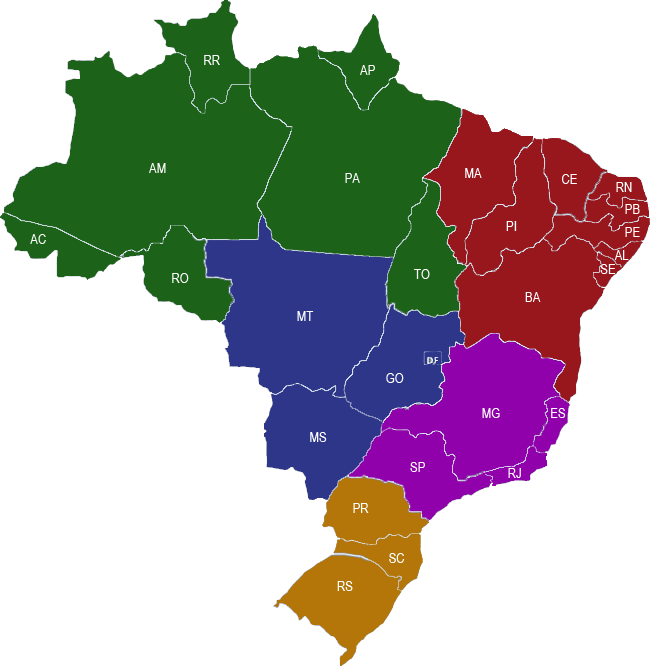
<style>
.page{position:relative;width:650px;height:666px;background:#ffffff}
.page>*{position:absolute;margin:0}
.t1{font:14px "ArialNarrow";color:#ffffff}
</style>
<div class="page">
<p class="t1" style="left:204px;top:55px;width:16px;height:10px">RR</p>
<p class="t1" style="left:360px;top:65px;width:15px;height:10px">AP</p>
<p class="t1" style="left:149px;top:163px;width:17px;height:10px">AM</p>
<p class="t1" style="left:345px;top:173px;width:15px;height:10px">PA</p>
<p class="t1" style="left:465px;top:168px;width:17px;height:10px">MA</p>
<p class="t1" style="left:562px;top:174px;width:15px;height:10px">CE</p>
<p class="t1" style="left:616px;top:182px;width:16px;height:10px">RN</p>
<p class="t1" style="left:625px;top:204px;width:15px;height:10px">PB</p>
<p class="t1" style="left:506px;top:221px;width:11px;height:10px">PI</p>
<p class="t1" style="left:625px;top:227px;width:15px;height:10px">PE</p>
<p class="t1" style="left:30px;top:234px;width:16px;height:10px">AC</p>
<p class="t1" style="left:614px;top:250px;width:15px;height:10px">AL</p>
<p class="t1" style="left:414px;top:269px;width:16px;height:10px">TO</p>
<p class="t1" style="left:600px;top:264px;width:16px;height:10px">SE</p>
<p class="t1" style="left:172px;top:273px;width:17px;height:10px">RO</p>
<p class="t1" style="left:525px;top:292px;width:16px;height:10px">BA</p>
<p class="t1" style="left:297px;top:311px;width:17px;height:10px">MT</p>
<p class="t1" style="left:386px;top:373px;width:18px;height:10px">GO</p>
<p class="t1" style="left:482px;top:408px;width:18px;height:10px">MG</p>
<p class="t1" style="left:551px;top:408px;width:15px;height:10px">ES</p>
<p class="t1" style="left:310px;top:432px;width:17px;height:10px">MS</p>
<p class="t1" style="left:410px;top:462px;width:15px;height:10px">SP</p>
<p class="t1" style="left:508px;top:468px;width:13px;height:10px">RJ</p>
<p class="t1" style="left:353px;top:503px;width:16px;height:10px">PR</p>
<p class="t1" style="left:389px;top:553px;width:16px;height:10px">SC</p>
<p class="t1" style="left:337px;top:581px;width:16px;height:10px">RS</p>
</div>
